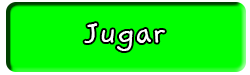
<style>
.page{position:relative;width:250px;height:75px;background:#00ff00}
.page>*{position:absolute;margin:0}
.t1{font:36px "Gaegu-Regular";color:#ffffff}
</style>
<div class="page">
<p class="t1" style="left:84px;top:23px;width:81px;height:28px">Jugar</p>
</div>
